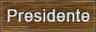
<style>
.page{position:relative;width:96px;height:32px}
.page>*{position:absolute;margin:0}
.t1{font:16px "ArialMT";letter-spacing:0.02em;color:#e4e4e4;font-weight:bold}
</style>
<div class="page">
<p class="t1" style="left:7px;top:9px;width:83px;height:13px">Presidente</p>
</div>
